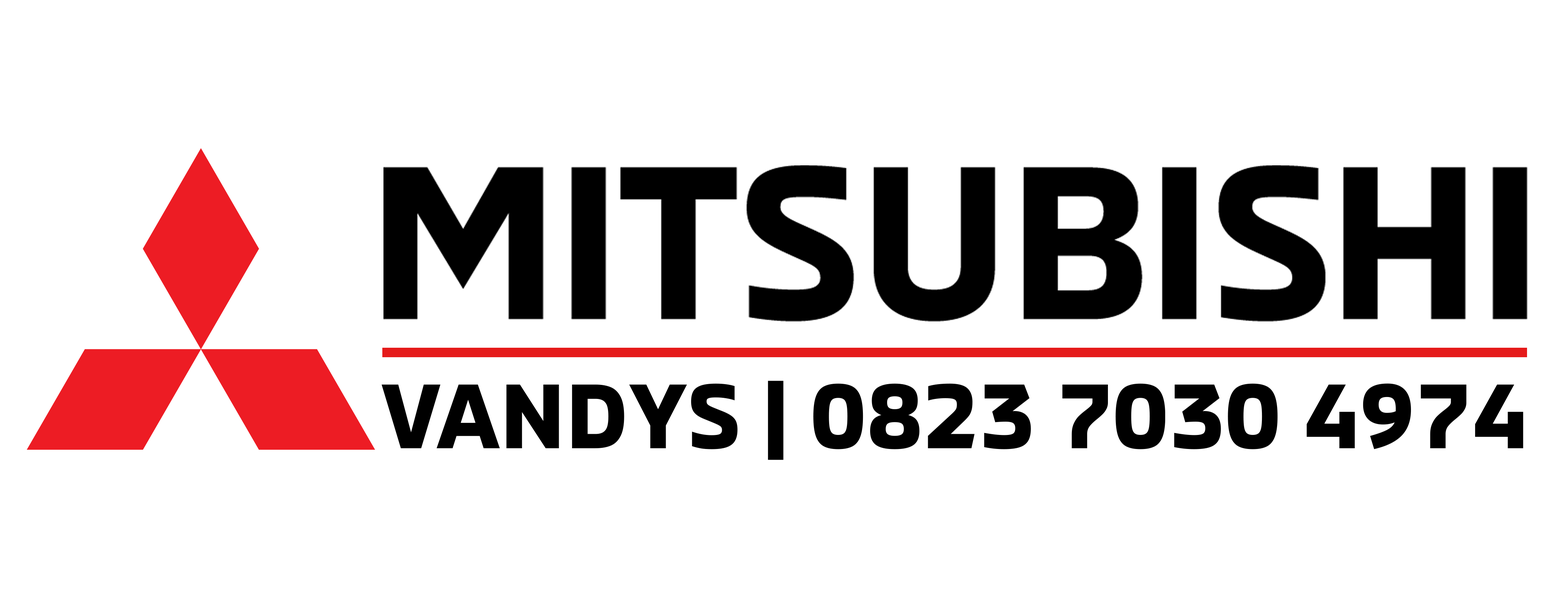
<style>
.page{position:relative;width:1568px;height:598px;background:#ffffff}
.page>*{position:absolute;margin:0}
.t1{font:93.6px "MMCOFFICE-Bold";color:#000000;text-transform:uppercase}
</style>
<div class="page">
<p class="t1" style="left:382px;top:381px;width:1141px;height:79px">VANDYS | 0823 7030 4974</p>
</div>
